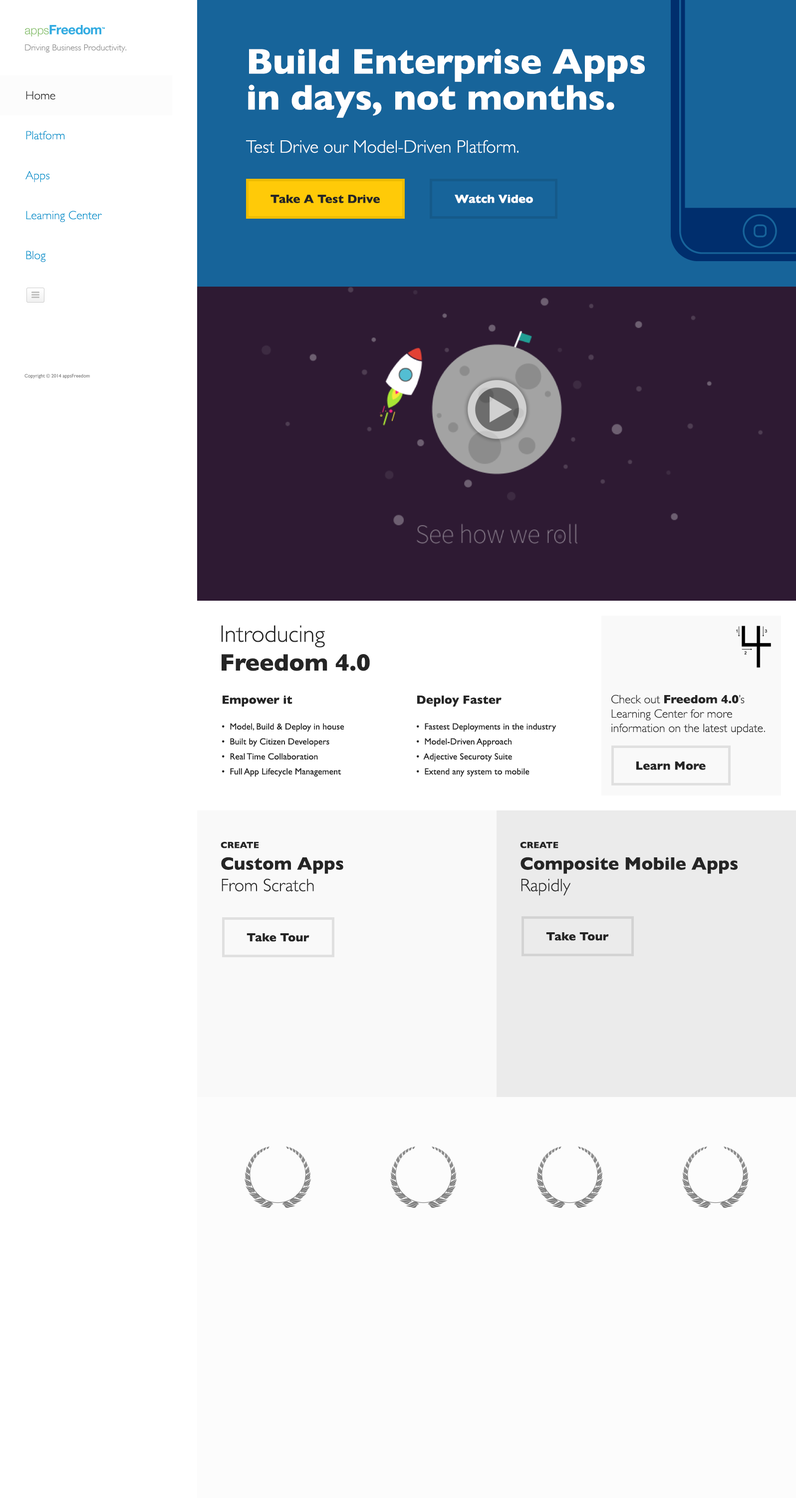
<style>
.page{position:relative;width:796px;height:1498px;background:#ffffff}
.page>*{position:absolute;margin:0}
.t1{font:9px "GillSans-Light";color:#898989}
.t2{font:18px "GillSans-Light";color:#ffffff}
.t3{font:35.9px "GillSans-Bold";color:#ffffff}
.t4{font:35.9px/35.9px "GillSans-Bold";color:#ffffff}
.t5{font:12px/39.9px "GillSans-Light";color:#0093cc}
.t6{font:12px/39.9px "GillSans-Light";color:#252525}
.t7{font:12px "GillSans-Bold";color:#252525}
.t8{font:12px "GillSans-Bold";color:#ffffff}
.t9{font:5px "GillSans";color:#898989}
.t10{font:24px "GillSans-Light";color:#252525}
.t11{font:24px "GillSans-Bold";color:#252525}
.t12{font:9px/15px "GillSans";color:#252525}
.t13{font:12px "GillSans-Light";color:#252525}
.t14{font:18px "GillSans-Light";color:#252525}
.t15{font:9px "GillSans-Bold";color:#252525;text-transform:uppercase}
.t16{font:18px "GillSans-Bold";color:#252525}
</style>
<div class="page">
<p class="t1" style="left:25px;top:44px;width:101px;height:8px">Driving Business Productivity.</p>
<p class="t2" style="left:246px;top:48px;width:399px;height:105px"><span class="t3">Build Enterprise Apps <br></span><span class="t4">in days, not months.<br><br></span>Test Drive our Model-Driven Platform.</p>
<p class="t5" style="left:25px;top:91px;width:77px;height:171px"><span class="t6">Home<br></span>Platform<br>Apps<br>Learning Center<br>Blog</p>
<p class="t7" style="left:271px;top:194px;width:109px;height:9px">Take A Test Drive</p>
<p class="t8" style="left:455px;top:194px;width:78px;height:9px">Watch Video</p>
<p class="t9" style="left:24px;top:373px;width:66px;height:5px">Copyright © 2014 appsFreedom</p>
<p class="t10" style="left:221px;top:625px;width:149px;height:46px">Introducing <br><span class="t11">Freedom 4.0</span></p>
<p class="t12" style="left:222px;top:695px;width:122px;height:82px"><span class="t7">Empower it<br><br></span>•  Model, Build &amp; Deploy in house<br>•  Built by Citizen Developers<br>•  Real Time Collaboration<br>•  Full App Lifecycle Management</p>
<p class="t12" style="left:416px;top:695px;width:141px;height:82px"><span class="t7">Deploy Faster<br><br></span>•  Fastest Deployments in the industry<br>•  Model-Driven Approach<br>•  Adjective Securoty Suite<br>•  Extend any system to mobile</p>
<p class="t13" style="left:612px;top:694px;width:153px;height:41px">Check out <span class="t7">Freedom 4.0</span>’s<br>Learning Center for more<br>information on the latest update.</p>
<p class="t7" style="left:636px;top:761px;width:70px;height:9px">Learn More</p>
<p class="t14" style="left:221px;top:841px;width:122px;height:51px"><span class="t15">Create <br></span><span class="t16">Custom Apps<br></span>From Scratch</p>
<p class="t16" style="left:520px;top:841px;width:218px;height:55px"><span class="t15">Create <br></span>Composite Mobile Apps<br><span class="t14">Rapidly</span></p>
<p class="t7" style="left:247px;top:933px;width:63px;height:8px">Take Tour</p>
<p class="t7" style="left:546px;top:932px;width:63px;height:8px">Take Tour</p>
</div>
